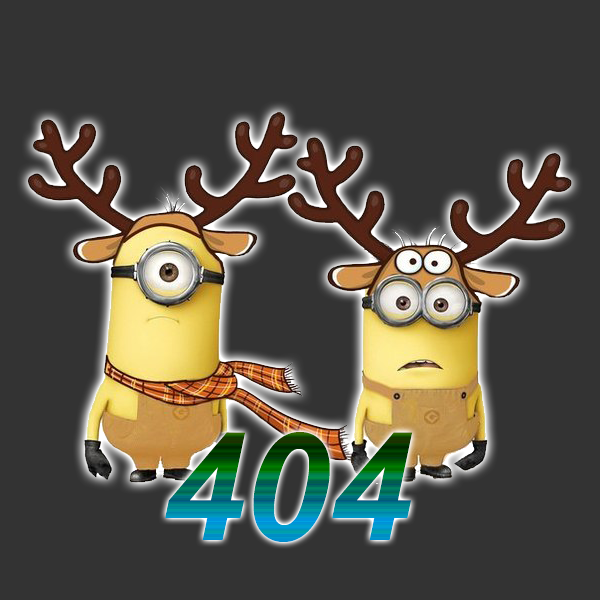
<style>
.page{position:relative;width:600px;height:600px;background:#333333}
.page>*{position:absolute;margin:0}
.t1{font:150px "Arial-BoldItalicMT"}
</style>
<div class="page">
<p class="t1" style="left:165px;top:432px;width:248px;height:110px">404</p>
</div>
